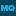
<style>
.page{position:relative;width:16px;height:16px;background:#06445b}
.page>*{position:absolute;margin:0}
.t1{font:9px "ProximaNova-Extrabld";letter-spacing:0.06em;color:#2bacd9}
</style>
<div class="page">
<p class="t1" style="left:1px;top:5px;width:14px;height:7px">MQ</p>
</div>
